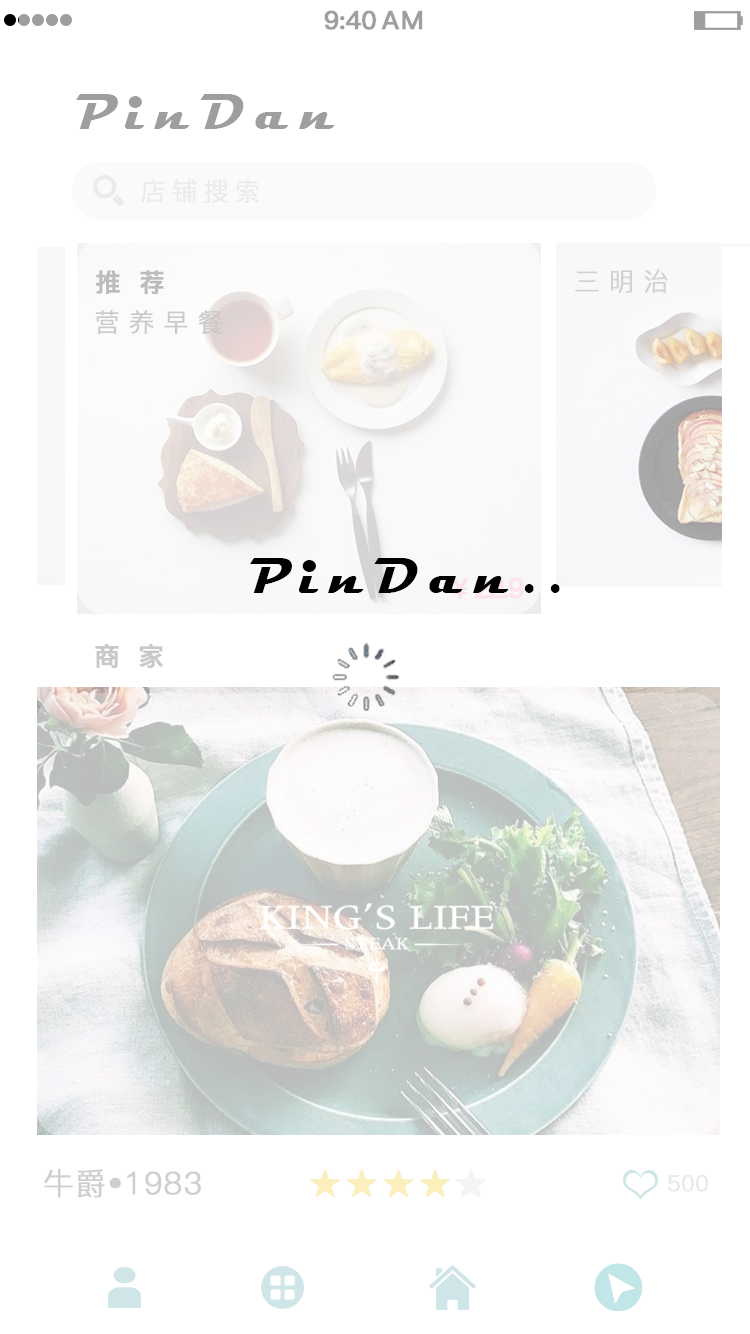
<style>
.page{position:relative;width:750px;height:1334px;background:#ffffff}
.page>*{position:absolute;margin:0}
.t1{font:25.4px "PingFang-SC-Bold";letter-spacing:-0.028em;color:#9e9e9e;font-weight:bold}
.t2{font:25.4px "PingFang-SC-Bold";letter-spacing:0.052em;color:#9e9e9e;font-weight:bold}
.t3{font:51.5px "Magneto-Bold";letter-spacing:0.214em;color:#9e9e9e}
.t4{font:25.4px "PingFang-SC-Regular";letter-spacing:0.212em;color:#ebebeb;font-weight:bold}
.t5{font:25.4px "PingFang-SC-Bold";letter-spacing:0.712em;color:#bdbbbb;font-weight:bold}
.t6{font:25.4px "PingFang-SC-Regular";letter-spacing:0.332em;color:#d3d2d2;font-weight:bold}
.t7{font:25.4px "PingFang-SC-Regular";letter-spacing:0.332em;color:#ccc9c9;font-weight:bold}
.t8{font:51.5px "Magneto-Bold";letter-spacing:0.214em;color:#000000}
.t9{font:25.4px "PingFang-SC-Bold";letter-spacing:0.712em;color:#c9c8c8;font-weight:bold}
.t10{font:31px "PingFang-SC-Regular";letter-spacing:0.012em;color:#cfcfcf;font-weight:bold}
.t11{font:22px "PingFang-SC-Regular";letter-spacing:0.012em;color:#e7e7e7;font-weight:bold}
</style>
<div class="page">
<p class="t1" style="left:324px;top:10px;width:52px;height:20px">9:40</p>
<p class="t2" style="left:381px;top:10px;width:42px;height:20px">AM</p>
<p class="t3" style="left:76px;top:94px;width:259px;height:35px">PinDan</p>
<p class="t4" style="left:141px;top:179px;width:118px;height:24px">店铺搜索</p>
<p class="t5" style="left:96px;top:270px;width:68px;height:25px">推荐</p>
<p class="t6" style="left:575px;top:269px;width:93px;height:24px">三明治</p>
<p class="t7" style="left:95px;top:310px;width:128px;height:24px">营养早餐</p>
<p class="t8" style="left:250px;top:558px;width:310px;height:35px">PinDan..</p>
<p class="t9" style="left:95px;top:644px;width:68px;height:24px">商家</p>
<p class="t10" style="left:44px;top:1168px;width:157px;height:30px">牛爵•1983</p>
<p class="t11" style="left:668px;top:1174px;width:40px;height:18px">500</p>
</div>
